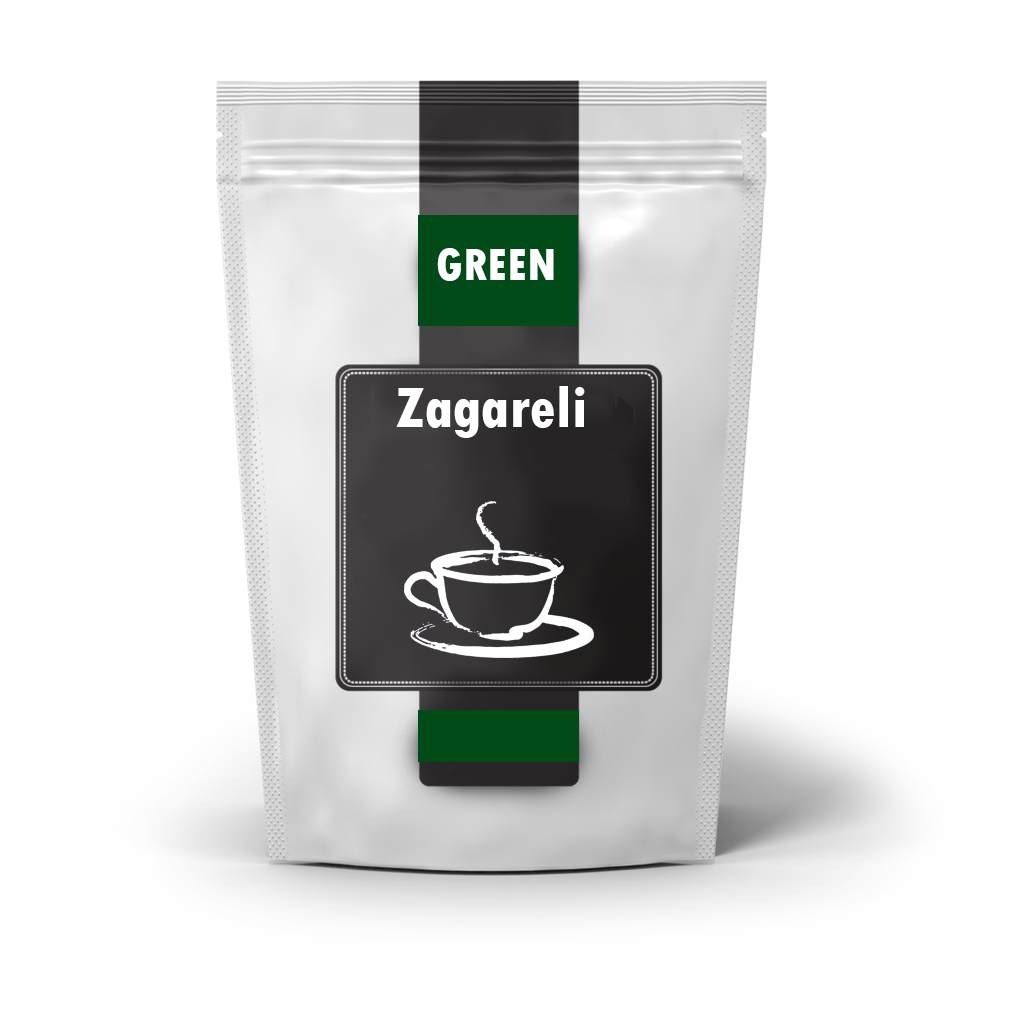
<style>
.page{position:relative;width:1024px;height:1024px;background:#ffffff}
.page>*{position:absolute;margin:0}
.t1{font:48px "TwCenMT-CondensedExtraBold";color:#ffffff}
.t2{font:60px "TwCenMT-CondensedExtraBold";color:#ffffff}
</style>
<div class="page">
<p class="t1" style="left:437px;top:248px;width:117px;height:33px">GREEN</p>
<p class="t2" style="left:396px;top:386px;width:189px;height:52px">Zagareli</p>
</div>
